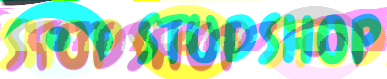
<style>
.page{position:relative;width:387px;height:79px;background:#ffffff}
.page>*{position:absolute;margin:0}
.t1{font:65px "Chewy"}
</style>
<div class="page">
<p class="t1" style="left:134px;top:12px;width:245px;height:53px">STUDSHOP</p>
</div>
